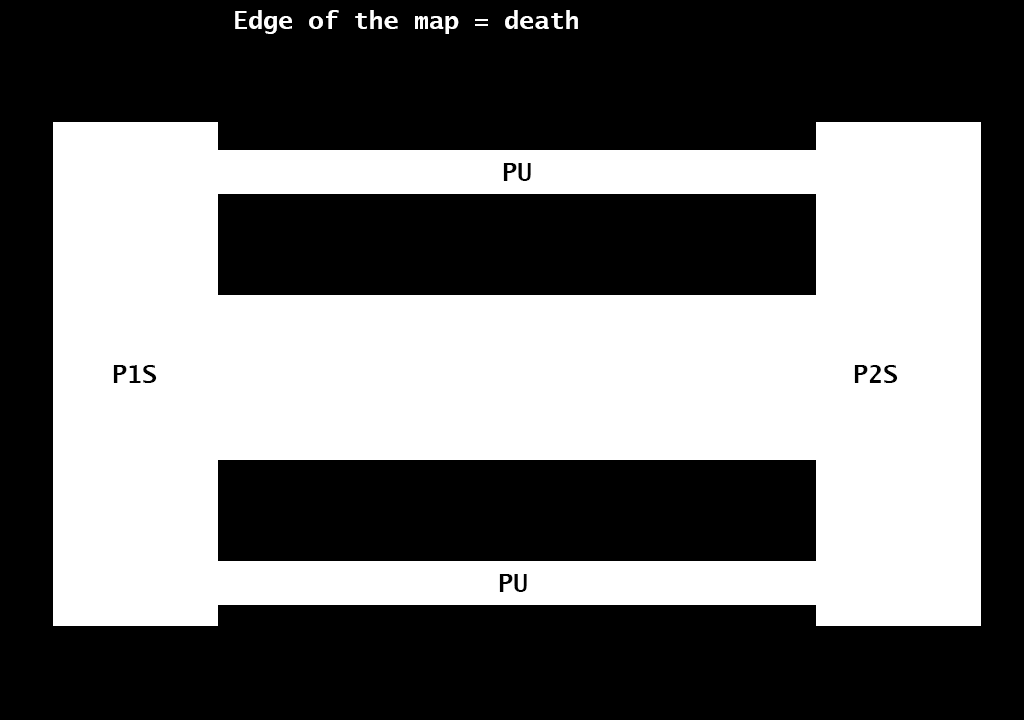
<style>
.page{position:relative;width:1024px;height:720px;background:#000000}
.page>*{position:absolute;margin:0}
.t1{font:25px "LucidaSans-TypewriterBold";color:#ffffff}
.t2{font:25px "LucidaSans-TypewriterBold";color:#000000}
</style>
<div class="page">
<p class="t1" style="left:235px;top:10px;width:343px;height:24px">Edge of the map = death</p>
<p class="t2" style="left:503px;top:163px;width:28px;height:18px">PU</p>
<p class="t2" style="left:113px;top:365px;width:44px;height:18px">P1S</p>
<p class="t2" style="left:854px;top:365px;width:44px;height:18px">P2S</p>
<p class="t2" style="left:499px;top:574px;width:28px;height:18px">PU</p>
</div>
